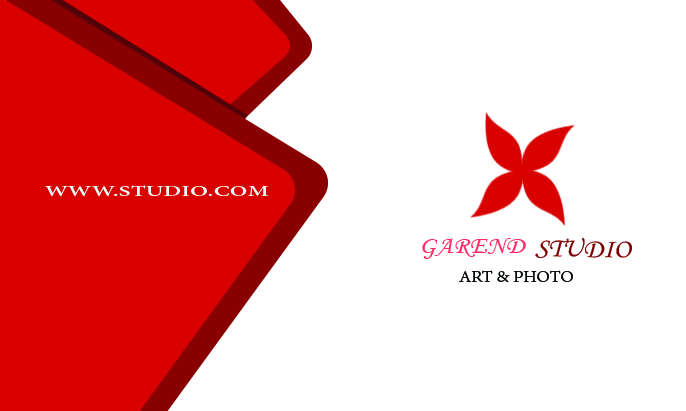
<style>
.page{position:relative;width:686px;height:411px;background:#ffffff}
.page>*{position:absolute;margin:0}
.t1{font:16.2px "AdobeDevanagari-Bold";color:#f0fefa;text-transform:uppercase;scale:1.64 1}
.t2{font:25.5px "MonotypeCorsiva";color:#ff2b65;text-transform:uppercase;scale:1.07 1}
.t3{font:26.7px "MonotypeCorsiva";color:#7b0000;text-transform:uppercase;scale:1.06 1}
.t4{font:17px "AdobeDevanagari-Regular";color:#070909;text-transform:uppercase;scale:1.13 1}
</style>
<div class="page">
<p class="t1" style="left:45px;top:185px;width:224px;height:11px">www.studio.com</p>
<p class="t2" style="left:422px;top:238px;width:104px;height:21px">garend</p>
<p class="t3" style="left:535px;top:238px;width:98px;height:21px;rotate:1deg">studio</p>
<p class="t4" style="left:459px;top:270px;width:114px;height:13px">art &amp; photo</p>
</div>
